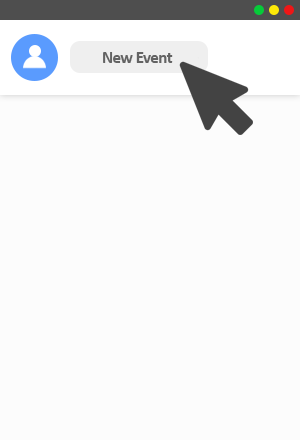
<style>
.page{position:relative;width:300px;height:440px;background:#fcfcfc}
.page>*{position:absolute;margin:0}
.t1{font:16.7px "Calibri-Bold";letter-spacing:-0.025em;color:#636363}
</style>
<div class="page">
<p class="t1" style="left:103px;top:52px;width:70px;height:11px">New Event</p>
</div>
